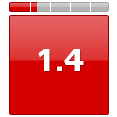
<style>
.page{position:relative;width:117px;height:117px;background:#d40000}
.page>*{position:absolute;margin:0}
.t1{font:36px "Colaborate-Bold";color:#ffffff;text-transform:uppercase}
</style>
<div class="page">
<p class="t1" style="left:38px;top:49px;width:46px;height:22px">1.4</p>
</div>
